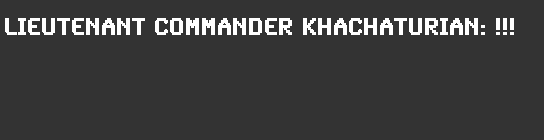
<style>
.page{position:relative;width:544px;height:140px;background:#333333}
.page>*{position:absolute;margin:0}
.t1{font:24px "SynchroLET";color:#ffffff;font-weight:bold}
</style>
<div class="page">
<p class="t1" style="left:5px;top:18px;width:509px;height:17px">LIEUTENANT COMMANDER KHACHATURIAN: !!!</p>
</div>
